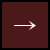
<style>
.page{position:relative;width:50px;height:50px;background:#4b1919}
.page>*{position:absolute;margin:0}
.t1{font:24px "H2gtrE";color:#ffffff}
</style>
<div class="page">
<p class="t1" style="left:14px;top:21px;width:22px;height:9px">→</p>
</div>
